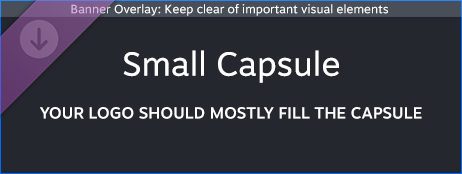
<style>
.page{position:relative;width:462px;height:174px;background:#24282e}
.page>*{position:absolute;margin:0}
.t1{font:12px "MotivaSans-Regular";color:#ffffff}
.t2{font:33.5px "MotivaSans-Regular";color:#ffffff}
.t3{font:16px "MotivaSans-Medium";color:#ffffff;text-transform:uppercase}
</style>
<div class="page">
<p class="t1" style="left:71px;top:4px;width:317px;height:12px">Banner Overlay: Keep clear of important visual elements</p>
<p class="t2" style="left:123px;top:50px;width:216px;height:33px">Small Capsule</p>
<p class="t3" style="left:40px;top:107px;width:382px;height:12px">your logo should mostly fill the capsule</p>
</div>
